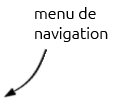
<style>
.page{position:relative;width:124px;height:100px;background:#ffffff}
.page>*{position:absolute;margin:0}
.t1{font:16px "Ubuntu-Light";color:#000000}
</style>
<div class="page">
<p class="t1" style="left:35px;top:7px;width:73px;height:35px">menu de <br>navigation</p>
</div>
